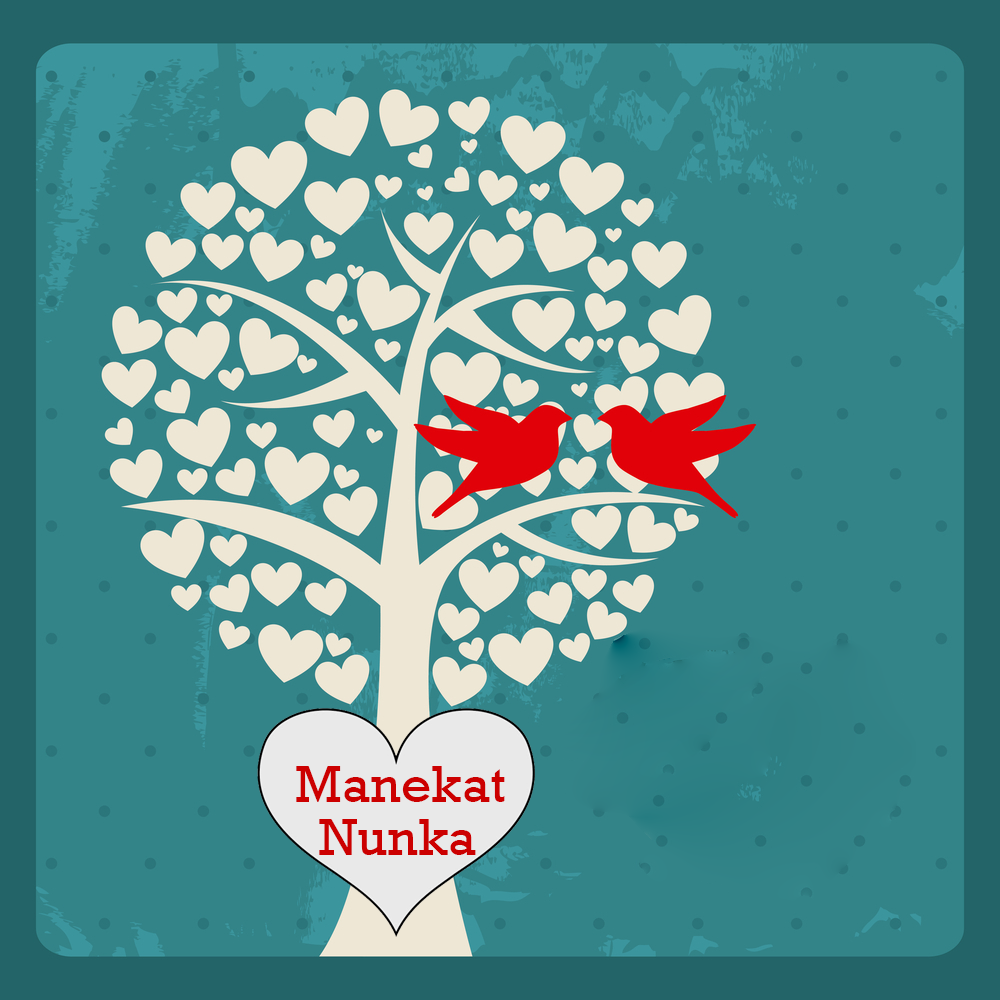
<style>
.page{position:relative;width:1000px;height:1000px;background:#338488}
.page>*{position:absolute;margin:0}
.t1{font:53.3px "Rockwell";color:#cc0000}
</style>
<div class="page">
<p class="t1" style="left:296px;top:766px;width:209px;height:36px">Manekat</p>
<p class="t1" style="left:319px;top:819px;width:157px;height:36px">Nunka</p>
</div>
